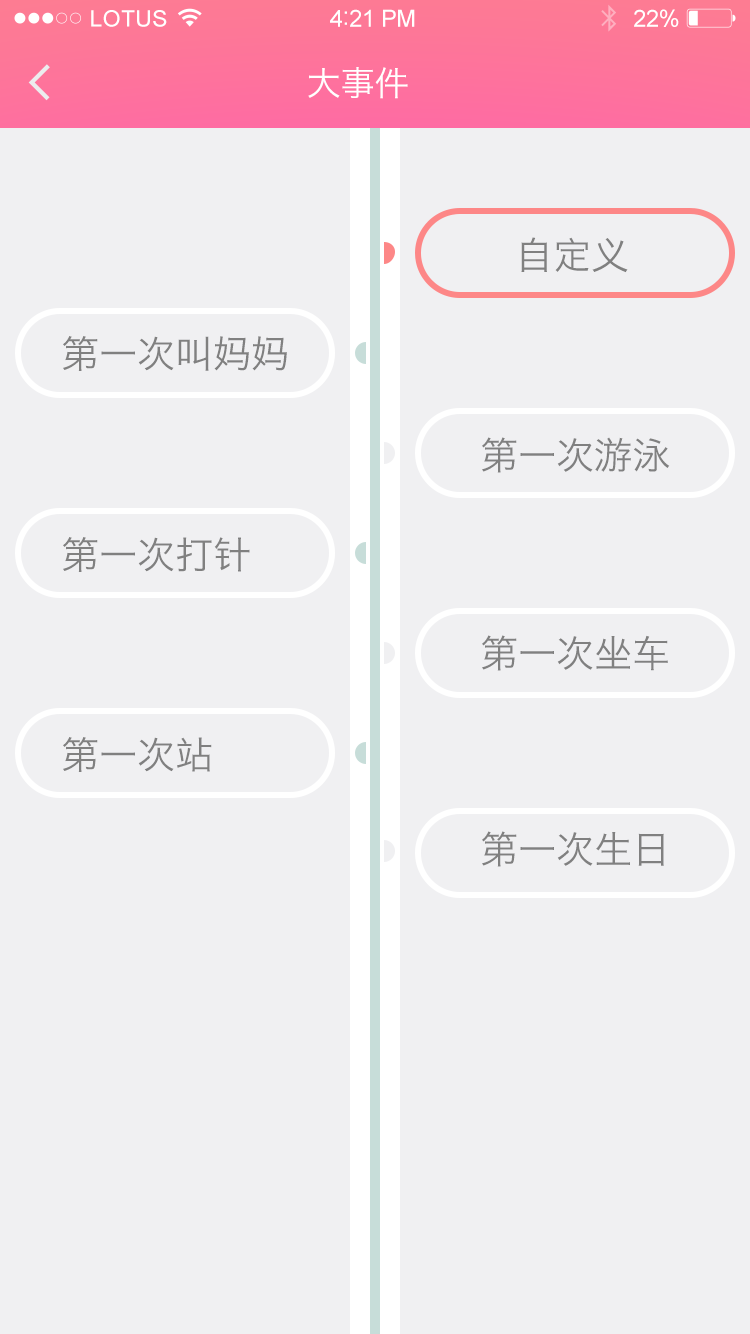
<style>
.page{position:relative;width:750px;height:1334px;background:#f0f0f2}
.page>*{position:absolute;margin:0}
.t1{font:22.6px "ArialMT";letter-spacing:0.02em;color:#ffffff}
.t2{font:23.6px "ArialMT";letter-spacing:-0.02em;color:#ffffff}
.t3{font:25.6px "ArialMT";letter-spacing:-0.02em;color:#ffffff}
.t4{font:34px "HiraginoSansGB-W3";color:#ffffff}
.t5{font:38px "HiraginoSansGB-W3";color:#808080}
</style>
<div class="page">
<p class="t1" style="left:91px;top:10px;width:76px;height:17px">LOTUS</p>
<p class="t2" style="left:330px;top:9px;width:85px;height:18px">4<span class="t3">:</span>21 PM</p>
<p class="t2" style="left:634px;top:9px;width:45px;height:18px">22%</p>
<p class="t4" style="left:308px;top:67px;width:100px;height:32px">大事件</p>
<p class="t5" style="left:521px;top:237px;width:107px;height:36px">自定义</p>
<p class="t5" style="left:63px;top:336px;width:224px;height:35px">第一次叫妈妈</p>
<p class="t5" style="left:482px;top:437px;width:188px;height:36px">第一次游泳</p>
<p class="t5" style="left:63px;top:537px;width:187px;height:35px">第一次打针</p>
<p class="t5" style="left:482px;top:635px;width:186px;height:36px">第一次坐车</p>
<p class="t5" style="left:63px;top:737px;width:149px;height:35px">第一次站</p>
<p class="t5" style="left:482px;top:831px;width:182px;height:36px">第一次生日</p>
</div>
